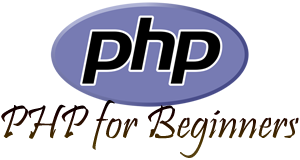
<style>
.page{position:relative;width:300px;height:160px;background:#ffffff}
.page>*{position:absolute;margin:0}
.t1{font:47.7px "Pristina-Regular"}
</style>
<div class="page">
<p class="t1" style="left:1px;top:100px;width:298px;height:58px">PHP for Beginners</p>
</div>
